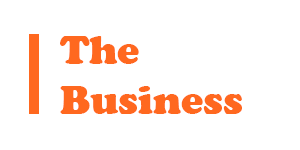
<style>
.page{position:relative;width:300px;height:150px;background:#ffffff}
.page>*{position:absolute;margin:0}
.t1{font:41.7px "CooperBlack";color:#ff681f}
</style>
<div class="page">
<p class="t1" style="left:60px;top:36px;width:182px;height:78px">The<br>Business</p>
</div>
